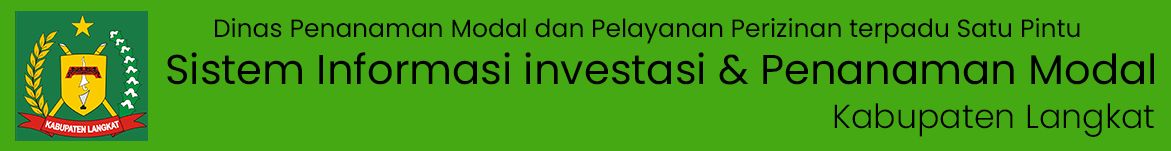
<style>
.page{position:relative;width:1171px;height:151px;background:#44a912}
.page>*{position:absolute;margin:0}
.t1{font:25px "Poppins-Regular";color:#000000}
.t2{font:41.7px "Poppins-Regular";color:#000000}
.t3{font:33.3px "Poppins-Light";color:#000000}
</style>
<div class="page">
<p class="t1" style="left:215px;top:18px;width:865px;height:26px">Dinas Penanaman Modal dan Pelayanan Perizinan terpadu Satu Pintu</p>
<p class="t2" style="left:167px;top:52px;width:987px;height:33px">Sistem Informasi investasi &amp; Penanaman Modal</p>
<p class="t3" style="left:834px;top:103px;width:320px;height:34px">Kabupaten Langkat</p>
</div>
